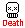
<style>
.page{position:relative;width:25px;height:28px;background:#ffffff}
.page>*{position:absolute;margin:0}
.t1{font:9px "AppleSDGothicNeoM00";color:#ff0000}
</style>
<div class="page">
<p class="t1" style="left:3px;top:19px;width:20px;height:7px">Death</p>
</div>
